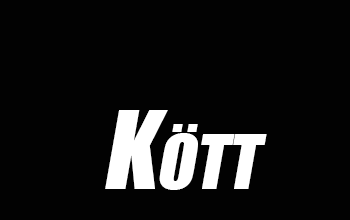
<style>
.page{position:relative;width:350px;height:220px;background:#020202}
.page>*{position:absolute;margin:0}
.t1{font:100px "Impact";color:#ffffff;font-variant:small-caps;font-style:italic}
</style>
<div class="page">
<p class="t1" style="left:105px;top:110px;width:162px;height:80px">Kött</p>
</div>
